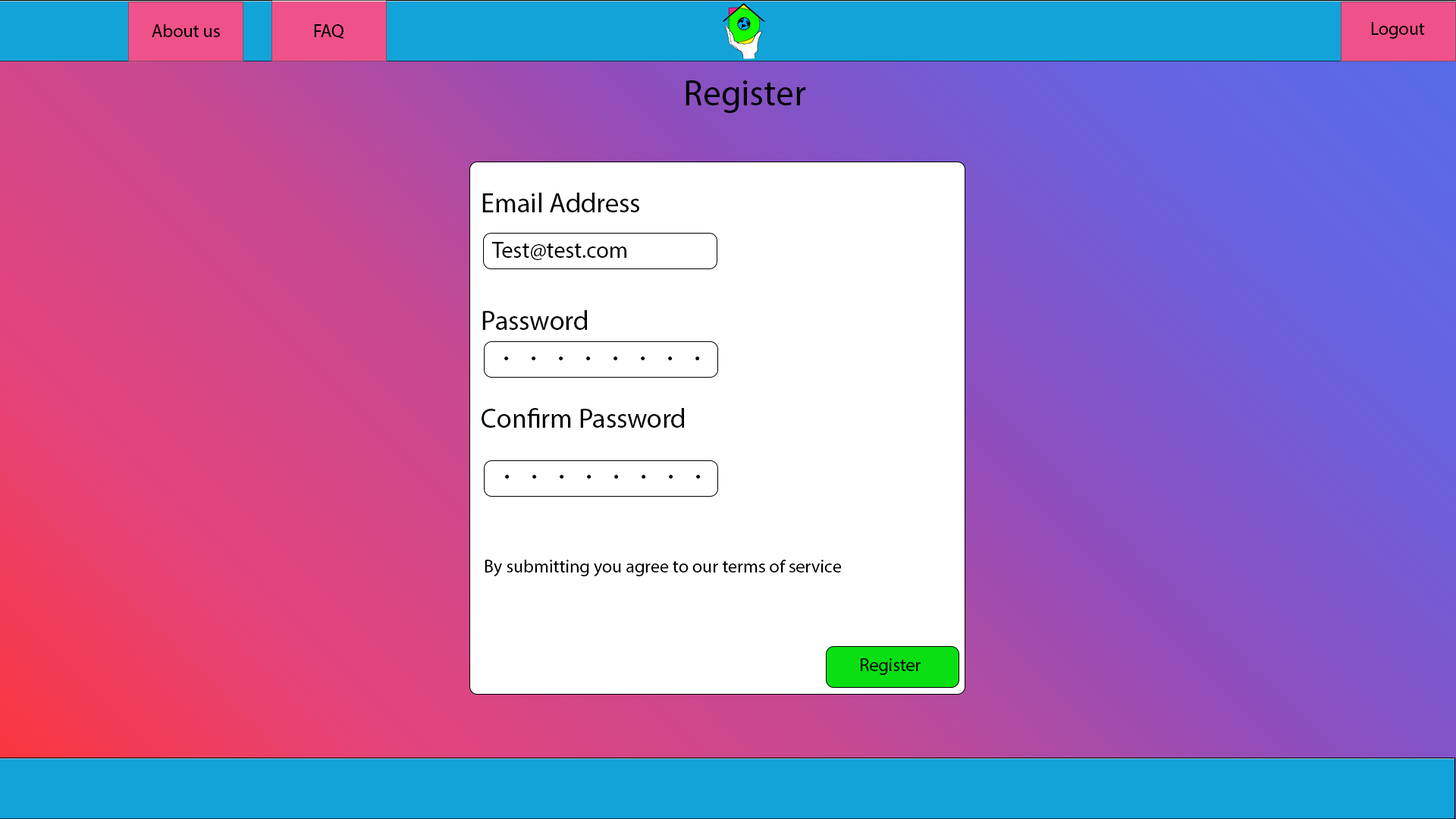
<style>
.page{position:relative;width:1456px;height:819px}
.page>*{position:absolute;margin:0}
.t1{font:18.2px "MyriadPro-Regular";color:#000000}
.t2{font:36.4px "MyriadPro-Regular";color:#000000}
.t3{font:27.3px "MyriadPro-Regular";color:#000000}
.t4{font:22.7px "MyriadPro-Regular";color:#000000}
</style>
<div class="page">
<p class="t1" style="left:152px;top:24px;width:68px;height:13px">About us</p>
<p class="t1" style="left:314px;top:24px;width:30px;height:15px">FAQ</p>
<p class="t1" style="left:1371px;top:22px;width:54px;height:17px">Logout</p>
<p class="t2" style="left:686px;top:80px;width:120px;height:33px">Register</p>
<p class="t3" style="left:482px;top:193px;width:157px;height:19px">Email Address</p>
<p class="t4" style="left:492px;top:242px;width:134px;height:18px">Test@test.com</p>
<p class="t3" style="left:482px;top:310px;width:105px;height:20px">Password</p>
<p class="t1" style="left:504px;top:356px;width:196px;height:5px">•  • • • • • • •</p>
<p class="t3" style="left:482px;top:408px;width:202px;height:20px">Confirm Password</p>
<p class="t1" style="left:505px;top:475px;width:196px;height:4px">•  • • • • • • •</p>
<p class="t1" style="left:485px;top:560px;width:357px;height:16px">By submitting you agree to our terms of service</p>
<p class="t1" style="left:861px;top:658px;width:60px;height:17px">Register</p>
</div>
